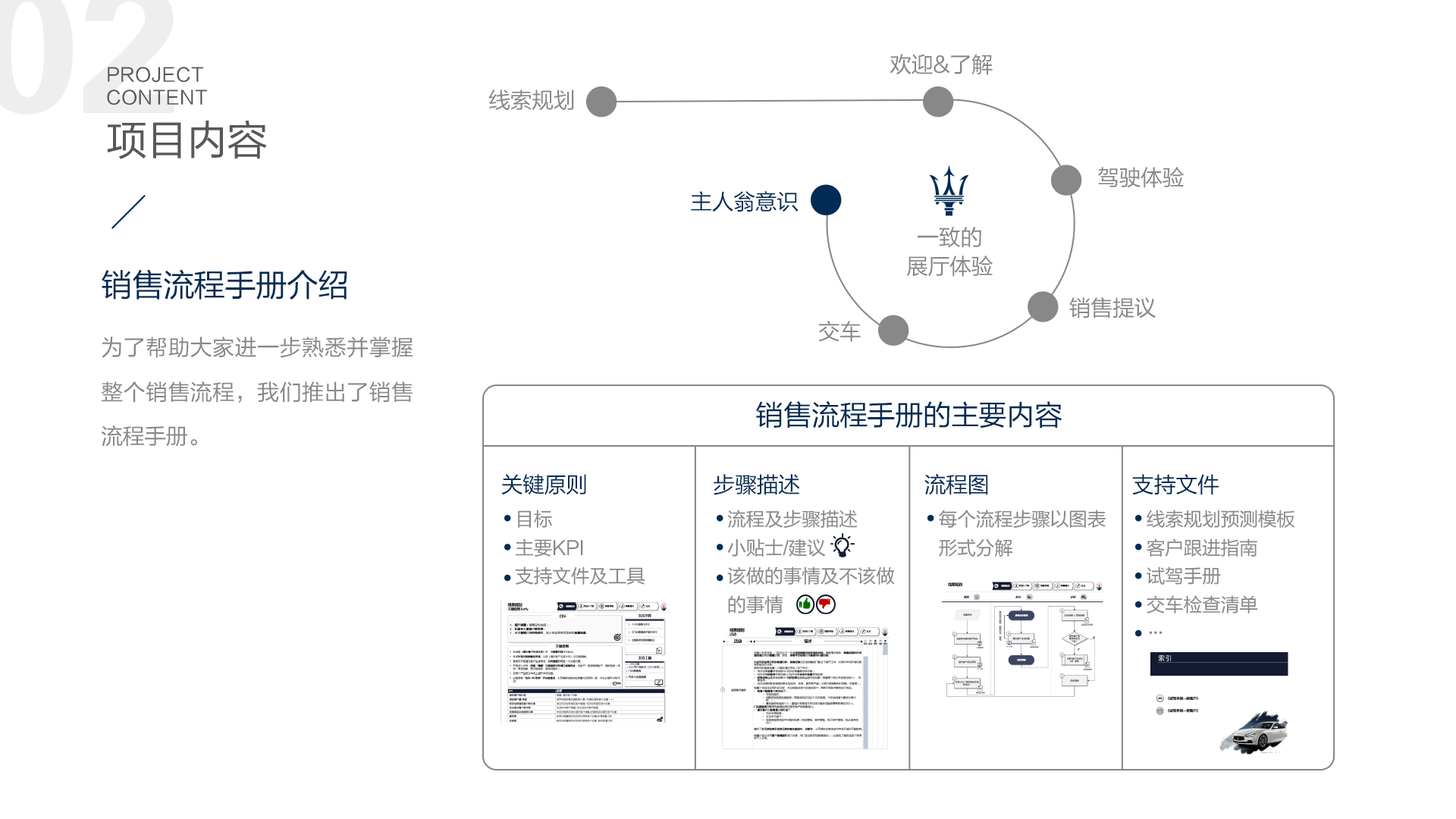
<style>
.page{position:relative;width:1456px;height:819px;background:#ffffff}
.page>*{position:absolute;margin:0}
.t1{font:22.1px "FZLTHJW--GB1-0";letter-spacing:-0.02em;color:#888888}
.t2{font:18.8px "FZLTHJW--GB1-0";letter-spacing:0.02em;color:#595757}
.t3{font:41.1px "FZLTHJW--GB1-0";letter-spacing:-0.02em;color:#595757}
.t4{font:22.1px "FZLTHJW--GB1-0";letter-spacing:-0.02em;color:#002c54}
.t5{font:22.1px/28.4px "FZLTHJW--GB1-0";letter-spacing:-0.02em;color:#888888}
.t6{font:31.6px "FZLTHJW--GB1-0";letter-spacing:-0.02em;color:#002c54}
.t7{font:22.1px/44.2px "FZLTHJW--GB1-0";letter-spacing:-0.02em;color:#888888}
.t8{font:28.4px "FZLTHJW--GB1-0";letter-spacing:-0.02em;color:#002c54}
.t9{font:19px/28.4px "FZLTHJW--GB1-0";letter-spacing:-0.02em;color:#888888}
</style>
<div class="page">
<p class="t1" style="left:890px;top:54px;width:103px;height:21px">欢迎&amp;了解</p>
<p class="t2" style="left:107px;top:67px;width:101px;height:38px">PROJECT <br>CONTENT</p>
<p class="t1" style="left:488px;top:89px;width:86px;height:22px">线索规划</p>
<p class="t3" style="left:107px;top:120px;width:160px;height:39px">项目内容</p>
<p class="t1" style="left:1098px;top:167px;width:86px;height:21px">驾驶体验</p>
<p class="t4" style="left:691px;top:191px;width:108px;height:21px">主人翁意识</p>
<p class="t5" style="left:906px;top:227px;width:87px;height:50px;text-align:center">一致的<br>展厅体验</p>
<p class="t6" style="left:102px;top:269px;width:245px;height:31px">销售流程手册介绍</p>
<p class="t1" style="left:1069px;top:297px;width:87px;height:21px">销售提议</p>
<p class="t1" style="left:818px;top:321px;width:43px;height:21px">交车</p>
<p class="t7" style="left:101px;top:337px;width:312px;height:110px;text-align:justify">为了帮助大家进一步熟悉并掌握整个销售流程，我们推出了销售流程手册。</p>
<p class="t8" style="left:756px;top:401px;width:306px;height:27px">销售流程手册的主要内容</p>
<p class="t4" style="left:501px;top:474px;width:85px;height:21px">关键原则</p>
<p class="t4" style="left:714px;top:474px;width:86px;height:21px">步骤描述</p>
<p class="t4" style="left:924px;top:473px;width:64px;height:22px">流程图</p>
<p class="t4" style="left:1132px;top:474px;width:87px;height:21px">支持文件</p>
<p class="t9" style="left:515px;top:510px;width:130px;height:75px">目标<br>主要KPI<br>支持文件及工具</p>
<p class="t9" style="left:727px;top:510px;width:168px;height:103px">流程及步骤描述<br>小贴士/建议<br>该做的事情及不该做<br>的事情</p>
<p class="t9" style="left:939px;top:510px;width:167px;height:47px">每个流程步骤以图表<br>形式分解</p>
<p class="t9" style="left:1147px;top:510px;width:148px;height:124px">线索规划预测模板<br>客户跟进指南<br>试驾手册<br>交车检查清单<br>…</p>
</div>
